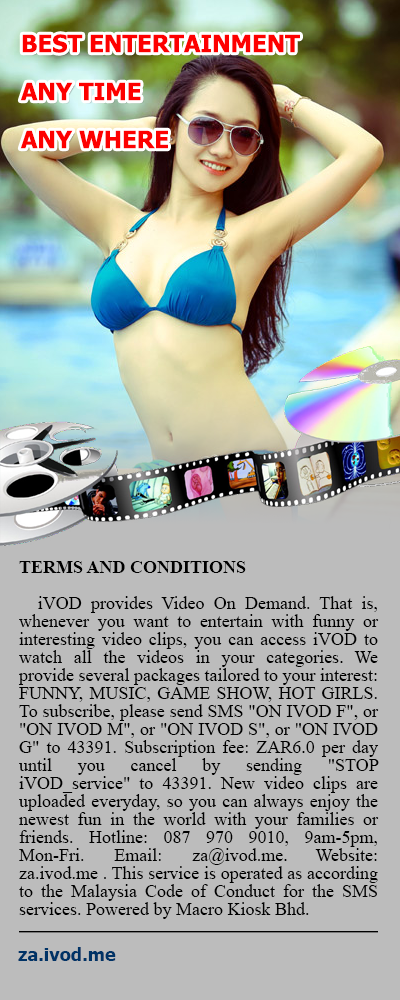
<style>
.page{position:relative;width:400px;height:1000px;background:#bcbcbc}
.page>*{position:absolute;margin:0}
.t1{font:24px/48px "Tahoma-Bold";color:#fd0000;text-transform:uppercase}
.t2{font:18px/18px "TimesNewRomanPSMT";color:#000000}
.t3{font:18px/36px "TimesNewRomanPS-BoldMT";color:#000000}
.t4{font:18px "Tahoma-Bold";color:#003366}
</style>
<div class="page">
<p class="t1" style="left:20px;top:34px;width:280px;height:115px">Best entertainment any time <br>any where</p>
<p class="t2" style="left:18px;top:561px;width:361px;height:358px;text-align:justify"><span class="t3">TERMS AND CONDITIONS<br> </span> iVOD provides Video On Demand. That is, whenever you want to entertain with funny or interesting video clips, you can access iVOD to watch all the videos in your categories. We provide several packages tailored to your interest: FUNNY, MUSIC, GAME SHOW, HOT GIRLS. To subscribe, please send SMS "ON IVOD F", or "ON IVOD M", or "ON IVOD S", or "ON IVOD G" to 43391. Subscription fee: ZAR6.0 per day until you cancel by sending "STOP iVOD_service" to 43391. New video clips are uploaded everyday, so you can always enjoy the newest fun in the world with your families or friends. Hotline: 087 970 9010, 9am-5pm, Mon-Fri. Email: za@ivod.me. Website: za.ivod.me . This service is operated as according to the Malaysia Code of Conduct for the SMS services. Powered by Macro Kiosk Bhd.</p>
<p class="t4" style="left:18px;top:947px;width:98px;height:14px">za.ivod.me</p>
</div>
